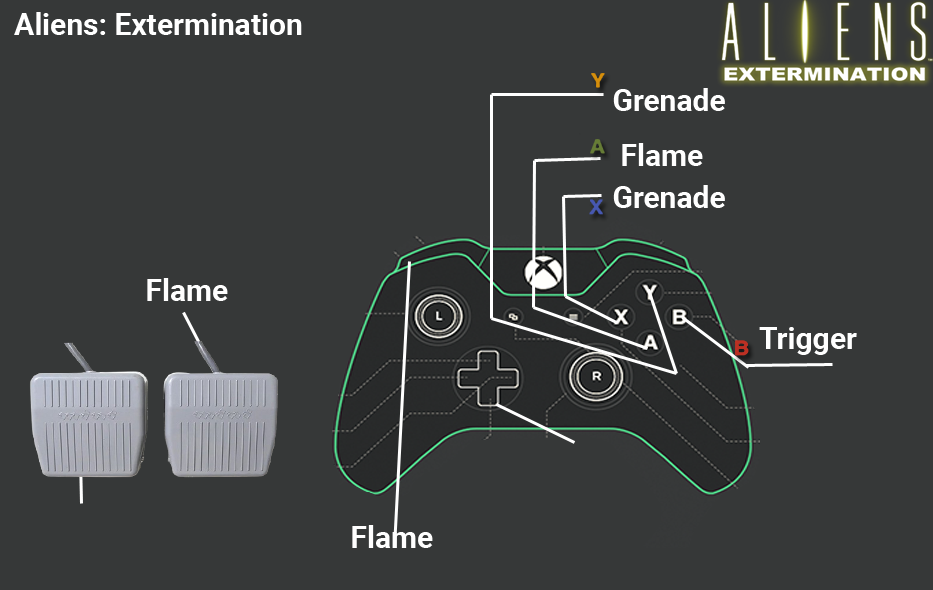
<style>
.page{position:relative;width:933px;height:590px;background:#363838}
.page>*{position:absolute;margin:0}
.t1{font:30px "Roboto-Bold";color:#ffffff}
</style>
<div class="page">
<p class="t1" style="left:14px;top:12px;width:288px;height:23px">Aliens: Extermination</p>
<p class="t1" style="left:613px;top:88px;width:112px;height:23px">Grenade</p>
<p class="t1" style="left:622px;top:143px;width:81px;height:23px">Flame</p>
<p class="t1" style="left:613px;top:185px;width:112px;height:23px">Grenade</p>
<p class="t1" style="left:147px;top:278px;width:81px;height:23px">Flame</p>
<p class="t1" style="left:759px;top:327px;width:98px;height:28px">Trigger</p>
<p class="t1" style="left:352px;top:525px;width:81px;height:23px">Flame</p>
</div>
